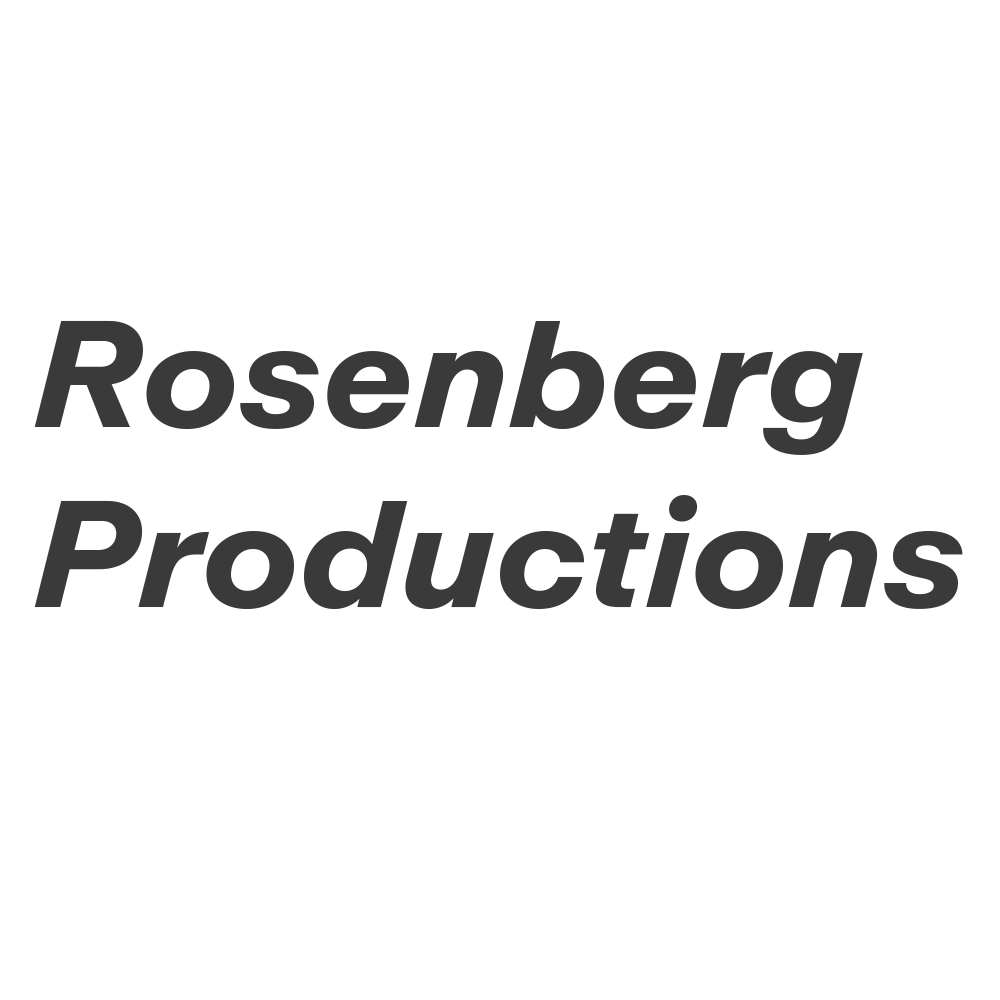
<style>
.page{position:relative;width:1000px;height:1000px;background:#ffffff}
.page>*{position:absolute;margin:0}
.t1{font:150px "ABCReproUnlicensedTrial-BoldItalic";color:#3a3a3a}
</style>
<div class="page">
<p class="t1" style="left:34px;top:320px;width:929px;height:290px">Rosenberg<br>Productions</p>
</div>
